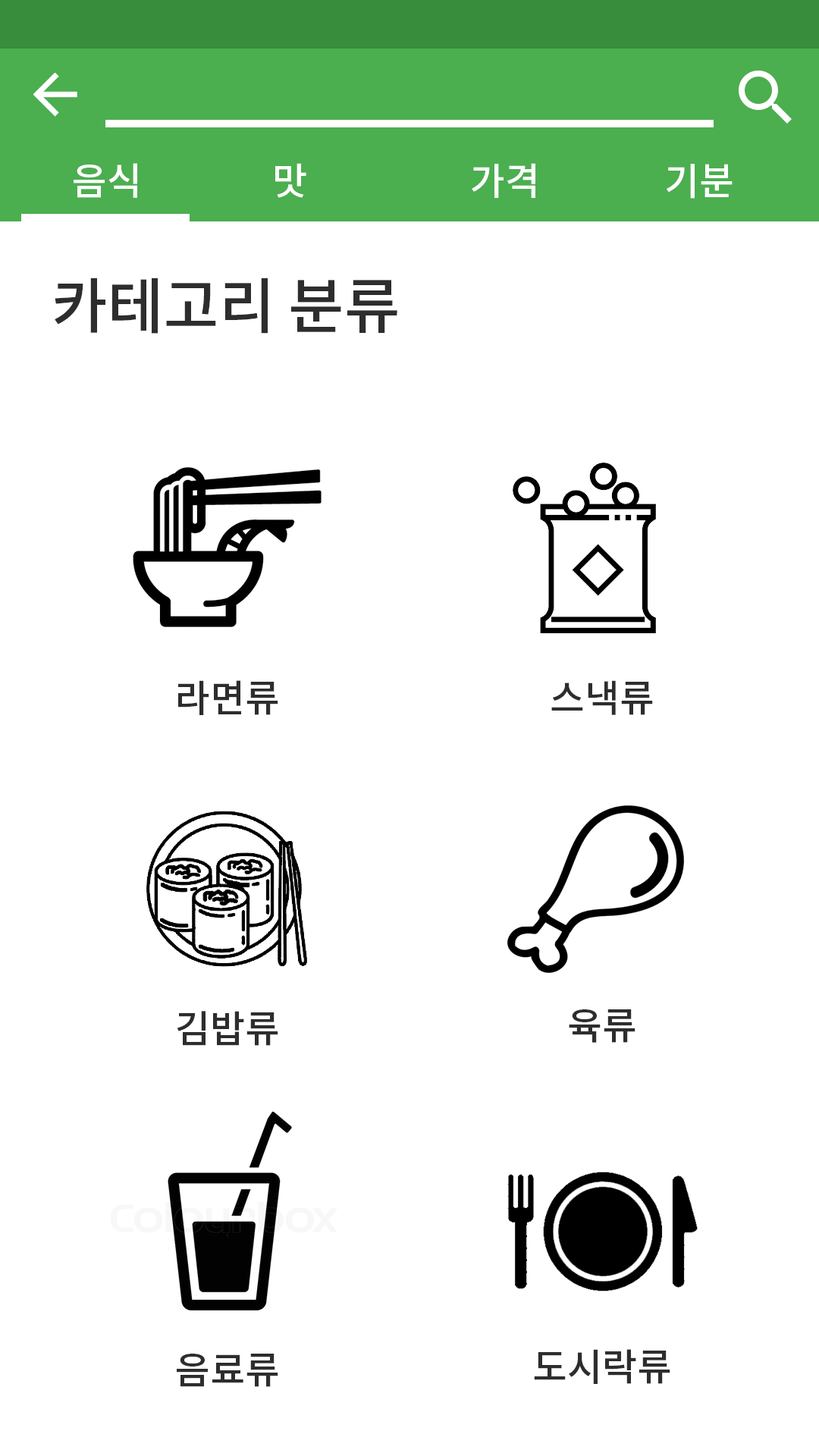
<style>
.page{position:relative;width:819px;height:1456px;background:#ffffff}
.page>*{position:absolute;margin:0}
.t1{font:37.9px "NotoSansCJKkr-Medium";color:#ffffff}
.t2{font:60.7px "NotoSansCJKkr-Medium";color:#2d2d2d}
.t3{font:37.9px "NotoSansCJKkr-Medium";color:#2d2d2d}
</style>
<div class="page">
<p class="t1" style="left:74px;top:163px;width:63px;height:35px">음식</p>
<p class="t1" style="left:275px;top:163px;width:31px;height:35px">맛</p>
<p class="t1" style="left:472px;top:163px;width:63px;height:35px">가격</p>
<p class="t1" style="left:667px;top:164px;width:66px;height:35px">기분</p>
<p class="t2" style="left:55px;top:278px;width:342px;height:56px">카테고리 분류</p>
<p class="t3" style="left:178px;top:680px;width:100px;height:35px">라면류</p>
<p class="t3" style="left:551px;top:680px;width:102px;height:35px">스낵류</p>
<p class="t3" style="left:177px;top:1011px;width:101px;height:35px">김밥류</p>
<p class="t3" style="left:569px;top:1009px;width:66px;height:34px">육류</p>
<p class="t3" style="left:534px;top:1349px;width:136px;height:35px">도시락류</p>
<p class="t3" style="left:177px;top:1354px;width:101px;height:33px">음료류</p>
</div>
